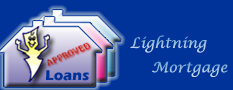
<style>
.page{position:relative;width:233px;height:90px;background:#003399}
.page>*{position:absolute;margin:0}
.t1{font:14.4px "LucidaCalligraphy-Italic";letter-spacing:0.01em}
.t2{font:14.4px "ErasITC-Bold";letter-spacing:0.01em;color:#003399}
</style>
<div class="page">
<p class="t1" style="left:130px;top:35px;width:77px;height:18px">Lightning</p>
<p class="t1" style="left:152px;top:61px;width:76px;height:16px">Mortgage</p>
<p class="t2" style="left:46px;top:70px;width:43px;height:11px">Loans</p>
</div>
